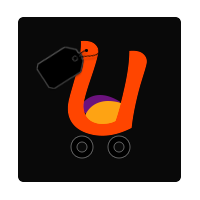
<style>
.page{position:relative;width:200px;height:200px;background:#090909}
.page>*{position:absolute;margin:0}
.t1{font:125.4px "Salsa-Regular";letter-spacing:0.02em;color:#ff4500}
</style>
<div class="page">
<p class="t1" style="left:67px;top:40px;width:80px;height:96px;rotate:12deg">U</p>
</div>
